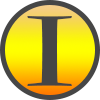
<style>
.page{position:relative;width:100px;height:100px;background:#464646}
.page>*{position:absolute;margin:0}
.t1{font:100px "CharlemagneStd-Bold";color:#464646;text-transform:uppercase;scale:1.3 1}
</style>
<div class="page">
<p class="t1" style="left:27px;top:16px;width:45px;height:70px">i</p>
</div>
